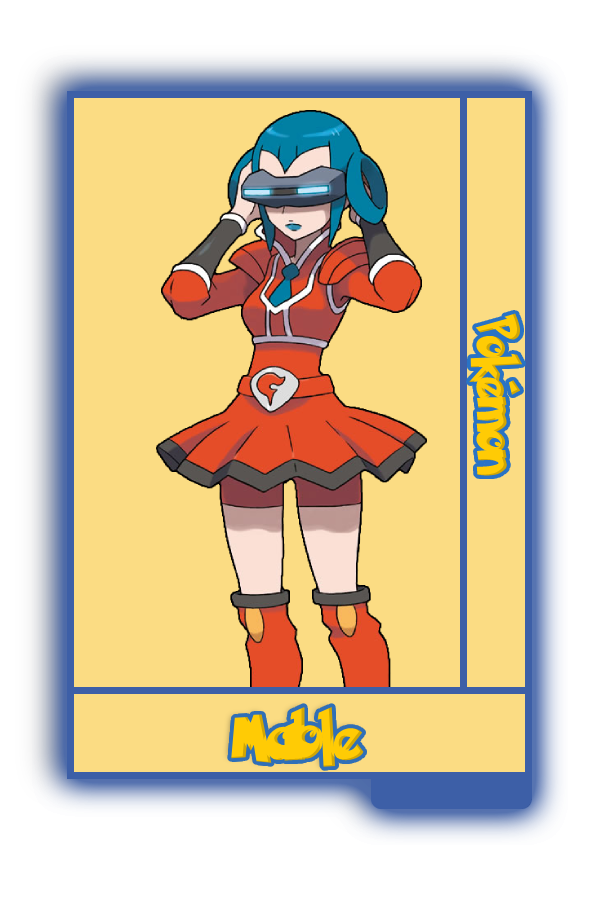
<style>
.page{position:relative;width:600px;height:900px;background:#fbdc83}
.page>*{position:absolute;margin:0}
.t1{font:48.8px "PokemonSolidNormal";color:#ffcb05;scale:0.8 1}
.t2{font:56.6px "PokemonSolidNormal";color:#ffcb05;scale:0.92 1}
</style>
<div class="page">
<p class="t1" style="left:469px;top:313px;width:54px;height:163px;rotate:90deg">Pokémon</p>
<p class="t2" style="left:231px;top:706px;width:133px;height:61px">Mable</p>
</div>
